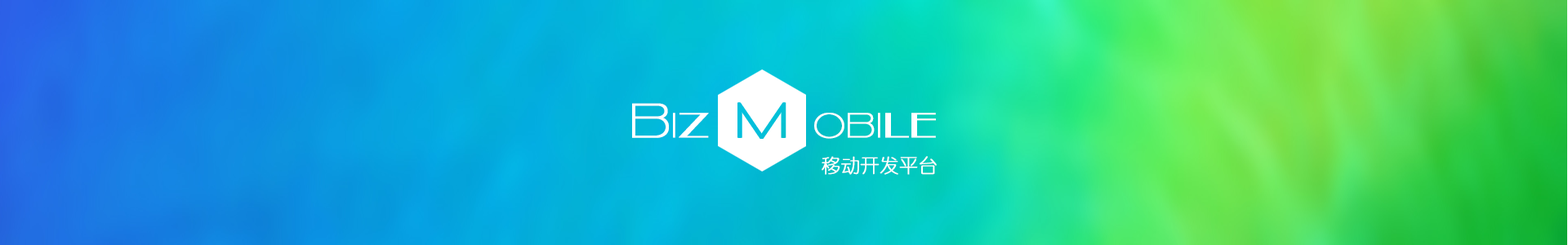
<style>
.page{position:relative;width:1568px;height:245px}
.page>*{position:absolute;margin:0}
.t1{font:33.8px "Kilsonburg-Regular";color:#ffffff;font-weight:bold}
.t2{font:47px "Kilsonburg-Regular";color:#ffffff;font-weight:bold}
.t3{font:18.9px "YouYuan";color:#ffffff;font-weight:bold}
</style>
<div class="page">
<p class="t1" style="left:632px;top:103px;width:304px;height:36px"><span class="t2">B</span>iz       obile</p>
<p class="t3" style="left:822px;top:156px;width:115px;height:19px">移动开发平台</p>
</div>
